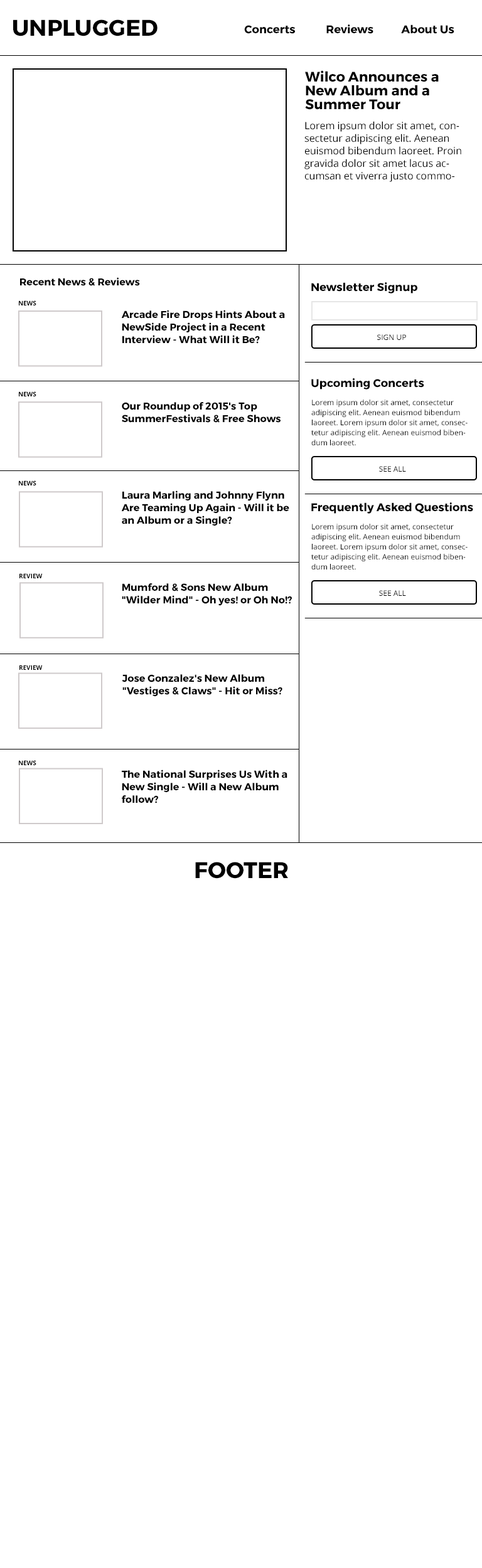
<style>
.page{position:relative;width:482px;height:1568px;background:#ffffff}
.page>*{position:absolute;margin:0}
.t1{font:22.6px "Montserrat-Bold";color:#000000}
.t2{font:11.3px "Montserrat-Bold";color:#000000}
.t3{font:13.8px/13.8px "Montserrat-Bold";color:#000000}
.t4{font:10px/12.5px "OpenSans";color:#000000}
.t5{font:10px "Montserrat-Bold";color:#000000}
.t6{font:6.3px "OpenSans-Bold";color:#000000}
.t7{font:10px/12.5px "Montserrat-Bold";color:#000000}
.t8{font:7.5px "OpenSans";color:#000000}
.t9{font:7.5px/10px "OpenSans";color:#000000}
</style>
<div class="page">
<p class="t1" style="left:13px;top:19px;width:144px;height:17px">UNPLUGGED</p>
<p class="t2" style="left:244px;top:25px;width:51px;height:9px">Concerts</p>
<p class="t2" style="left:326px;top:24px;width:47px;height:10px">Reviews</p>
<p class="t2" style="left:401px;top:24px;width:53px;height:10px">About Us</p>
<p class="t3" style="left:305px;top:70px;width:133px;height:40px">Wilco Announces a New Album and a Summer Tour</p>
<p class="t4" style="left:304px;top:121px;width:157px;height:61px">Lorem ipsum dolor sit amet, consectetur adipiscing elit. Aenean euismod bibendum laoreet. Proin gravida dolor sit amet lacus accumsan et viverra justo commodo.</p>
<p class="t5" style="left:20px;top:277px;width:120px;height:9px">Recent News &amp; Reviews</p>
<p class="t2" style="left:311px;top:282px;width:106px;height:12px">Newsletter Signup</p>
<p class="t6" style="left:19px;top:300px;width:17px;height:5px">NEWS</p>
<p class="t7" style="left:121px;top:310px;width:164px;height:34px">Arcade Fire Drops Hints About a NewSide Project in a Recent Interview - What Will it Be?</p>
<p class="t8" style="left:377px;top:334px;width:29px;height:6px">SIGN UP</p>
<p class="t2" style="left:311px;top:378px;width:113px;height:11px">Upcoming Concerts</p>
<p class="t6" style="left:19px;top:391px;width:17px;height:5px">NEWS</p>
<p class="t9" style="left:311px;top:400px;width:156px;height:45px">Lorem ipsum dolor sit amet, consectetur adipiscing elit. Aenean euismod bibendum laoreet. Lorem ipsum dolor sit amet, consectetur adipiscing elit. Aenean euismod bibendum laoreet.</p>
<p class="t7" style="left:122px;top:402px;width:158px;height:21px">Our Roundup of 2015's Top<br>SummerFestivals &amp; Free Shows</p>
<p class="t8" style="left:379px;top:466px;width:27px;height:6px">SEE ALL</p>
<p class="t6" style="left:19px;top:480px;width:17px;height:5px">NEWS</p>
<p class="t7" style="left:121px;top:490px;width:168px;height:36px">Laura Marling and Johnny Flynn Are Teaming Up Again - Will it be an Album or a Single?</p>
<p class="t2" style="left:311px;top:502px;width:162px;height:12px">Frequently Asked Questions</p>
<p class="t9" style="left:311px;top:524px;width:156px;height:45px">Lorem ipsum dolor sit amet, consectetur adipiscing elit. Aenean euismod bibendum laoreet. Lorem ipsum dolor sit amet, consectetur adipiscing elit. Aenean euismod bibendum laoreet.</p>
<p class="t6" style="left:19px;top:573px;width:24px;height:5px">REVIEW</p>
<p class="t7" style="left:122px;top:583px;width:170px;height:23px">Mumford &amp; Sons New Album "Wilder Mind" - Oh yes! or Oh No!?</p>
<p class="t8" style="left:379px;top:590px;width:27px;height:6px">SEE ALL</p>
<p class="t6" style="left:19px;top:665px;width:24px;height:5px">REVIEW</p>
<p class="t7" style="left:122px;top:674px;width:160px;height:22px">Jose Gonzalez's New Album  "Vestiges &amp; Claws" - Hit or Miss?</p>
<p class="t6" style="left:19px;top:760px;width:17px;height:5px">NEWS</p>
<p class="t7" style="left:122px;top:770px;width:165px;height:33px">The National Surprises Us With a New Single - Will a New Album follow?</p>
<p class="t1" style="left:195px;top:862px;width:93px;height:17px">FOOTER</p>
</div>
